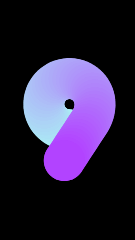
<style>
.page{position:relative;width:135px;height:240px;background:#000000}
.page>*{position:absolute;margin:0}
.t1{font:175.6px "AbeloneRegular"}
</style>
<div class="page">
<p class="t1" style="left:23px;top:58px;width:93px;height:123px">9</p>
</div>
